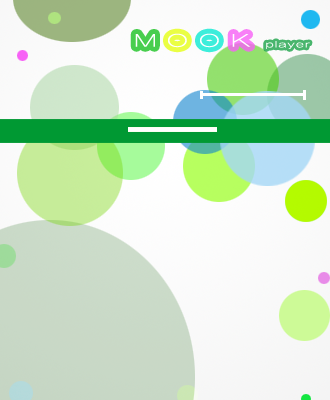
<style>
.page{position:relative;width:330px;height:400px}
.page>*{position:absolute;margin:0}
.t1{font:18px "YDIYGO110";letter-spacing:0.075em;color:#ffffff;scale:1.67 1}
.t2{font:9px "YDIYGO110";letter-spacing:0.075em;color:#ffffff;scale:1.67 1}
</style>
<div class="page">
<p class="t1" style="left:135px;top:34px;width:20px;height:13px">M</p>
<p class="t1" style="left:168px;top:33px;width:19px;height:15px">O</p>
<p class="t1" style="left:200px;top:33px;width:19px;height:15px">O</p>
<p class="t1" style="left:232px;top:34px;width:19px;height:13px">K</p>
<p class="t2" style="left:266px;top:41px;width:44px;height:8px">player</p>
</div>
